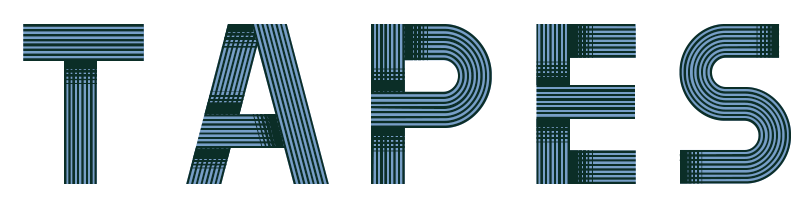
<style>
.page{position:relative;width:798px;height:210px;background:#ffffff}
.page>*{position:absolute;margin:0}
.t1{font:250px "TribbonA";letter-spacing:0.1em;color:#779fc7}
.t2{font:250px "TribbonB";letter-spacing:0.1em;color:#0b2e27}
.t3{font:250px "TribbonC";letter-spacing:0.1em;color:#0b2e27}
</style>
<div class="page">
<p class="t1" style="left:23px;top:24px;width:768px;height:160px">TAPES</p>
<p class="t2" style="left:23px;top:24px;width:768px;height:160px">TAPES</p>
<p class="t3" style="left:64px;top:24px;width:715px;height:160px">TAPES</p>
</div>
